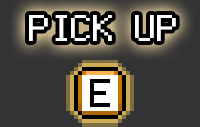
<style>
.page{position:relative;width:200px;height:127px;background:#333333}
.page>*{position:absolute;margin:0}
.t1{font:52px "Silver";color:#ffffff;scale:1.3 1}
</style>
<div class="page">
<p class="t1" style="left:29px;top:15px;width:147px;height:26px">PICK UP</p>
</div>
